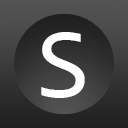
<style>
.page{position:relative;width:128px;height:128px}
.page>*{position:absolute;margin:0}
.t1{font:100px "Consolas";color:#ffffff}
</style>
<div class="page">
<p class="t1" style="left:41px;top:32px;width:44px;height:66px">S</p>
</div>
